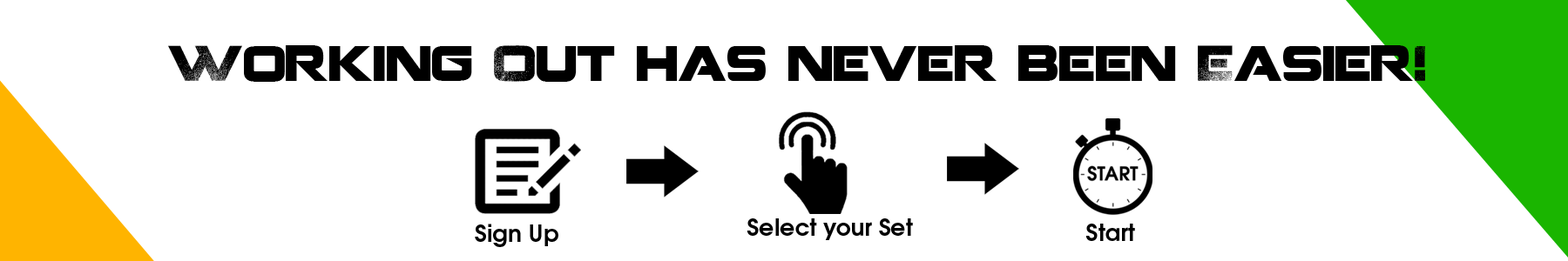
<style>
.page{position:relative;width:1568px;height:261px;background:#ffffff}
.page>*{position:absolute;margin:0}
.t1{font:49.4px "Coalition";color:#000000;scale:0.9 1}
.t2{font:23.3px "TeXGyreAdventor-Bold";color:#000000}
</style>
<div class="page">
<p class="t1" style="left:168px;top:45px;width:1257px;height:37px">Working Out has never been Easier!</p>
<p class="t2" style="left:747px;top:219px;width:166px;height:21px">Select your Set</p>
<p class="t2" style="left:475px;top:224px;width:83px;height:23px">Sign Up</p>
<p class="t2" style="left:1085px;top:224px;width:50px;height:17px">Start</p>
</div>
